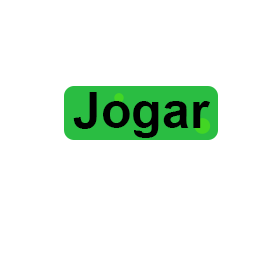
<style>
.page{position:relative;width:256px;height:256px;background:#ffffff}
.page>*{position:absolute;margin:0}
.t1{font:50px "Arial-BoldMT";color:#000000}
</style>
<div class="page">
<p class="t1" style="left:73px;top:92px;width:137px;height:46px">Jogar</p>
</div>
